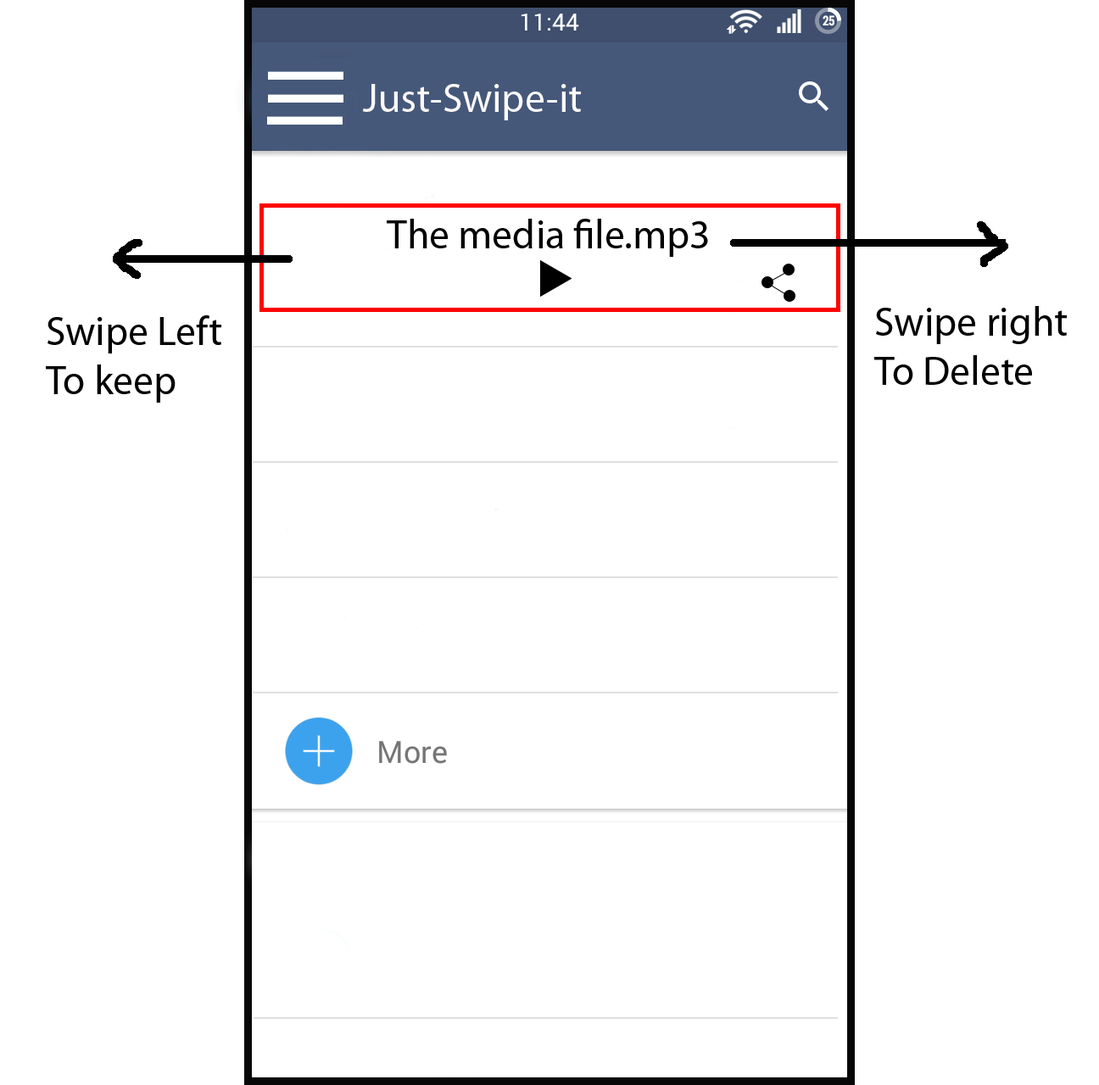
<style>
.page{position:relative;width:1099px;height:1085px;background:#ffffff}
.page>*{position:absolute;margin:0}
.t1{font:40.7px "MyriadPro-Regular";color:#fcf9f9}
.t2{font:40.7px "MyriadPro-Regular";color:#000000}
</style>
<div class="page">
<p class="t1" style="left:363px;top:84px;width:218px;height:36px">Just-Swipe-it</p>
<p class="t2" style="left:387px;top:219px;width:321px;height:38px">The media file.mp3</p>
<p class="t2" style="left:46px;top:315px;width:175px;height:88px">Swipe Left<br>To keep</p>
<p class="t2" style="left:874px;top:306px;width:193px;height:79px">Swipe right<br>To Delete</p>
</div>
